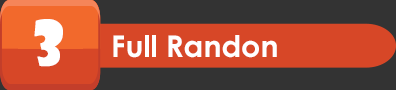
<style>
.page{position:relative;width:396px;height:90px;background:#d74727}
.page>*{position:absolute;margin:0}
.t1{font:60px "ShowcardGothic-Reg";color:#ffffff;font-weight:bold}
.t2{font:30px "CenturyGothic-Bold";color:#ffffff}
</style>
<div class="page">
<p class="t1" style="left:34px;top:19px;width:29px;height:48px">3</p>
<p class="t2" style="left:113px;top:35px;width:164px;height:23px">Full Randon</p>
</div>
